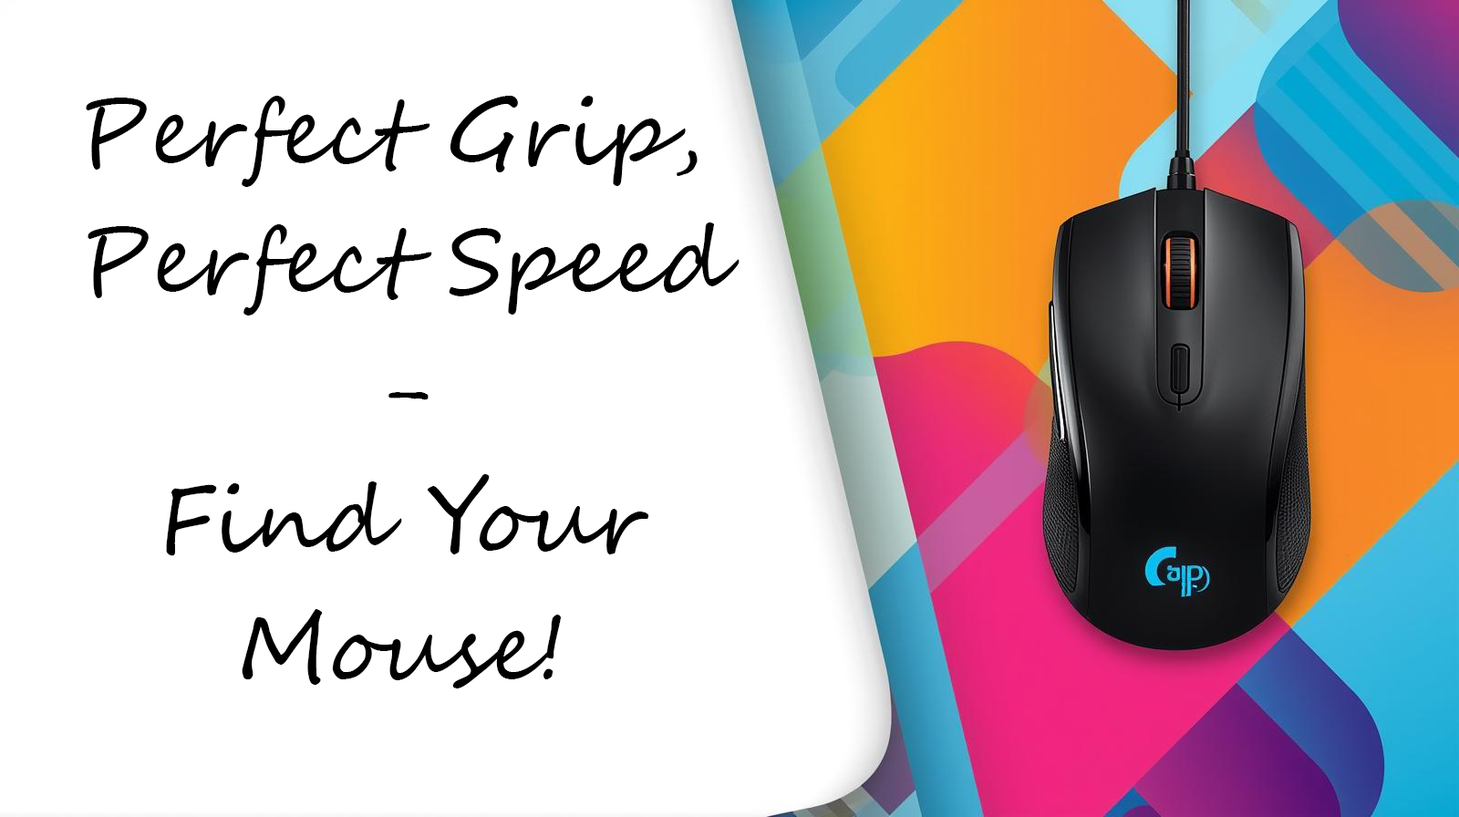
<style>
.page{position:relative;width:1459px;height:817px;background:#ffffff}
.page>*{position:absolute;margin:0}
.t1{font:91.2px "SegoeScript";color:#000000}
</style>
<div class="page">
<p class="t1" style="left:86px;top:96px;width:654px;height:593px;text-align:center">Perfect Grip, <br><br>Perfect Speed<br><br>-<br><br>Find Your<br><br>Mouse!</p>
</div>
